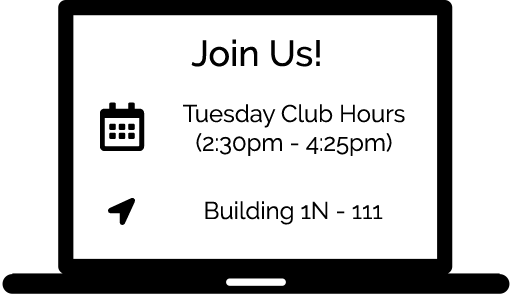
<style>
.page{position:relative;width:512px;height:295px;background:#ffffff}
.page>*{position:absolute;margin:0}
.t1{font:36px "Raleway-Medium";color:#000000}
.t2{font:24px "Raleway-Regular";color:#000000}
</style>
<div class="page">
<p class="t1" style="left:191px;top:39px;width:129px;height:28px">Join Us!</p>
<p class="t2" style="left:183px;top:104px;width:222px;height:52px;text-align:center">Tuesday Club Hours<br>(2:30pm - 4:25pm)</p>
<p class="t2" style="left:205px;top:201px;width:178px;height:24px">Building 1N - 111</p>
</div>
